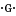
<style>
.page{position:relative;width:16px;height:16px;background:#ffffff}
.page>*{position:absolute;margin:0}
.t1{font:9.9px "Grad";color:#000000;scale:0.96 1}
</style>
<div class="page">
<p class="t1" style="left:5px;top:4px;width:7px;height:8px">G</p>
</div>
